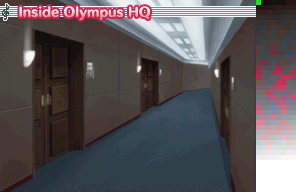
<style>
.page{position:relative;width:296px;height:192px}
.page>*{position:absolute;margin:0}
.t1{font:12px "HummingStd-E";letter-spacing:0.02em}
</style>
<div class="page">
<p class="t1" style="left:19px;top:6px;width:131px;height:14px">Inside Olympus HQ</p>
</div>
